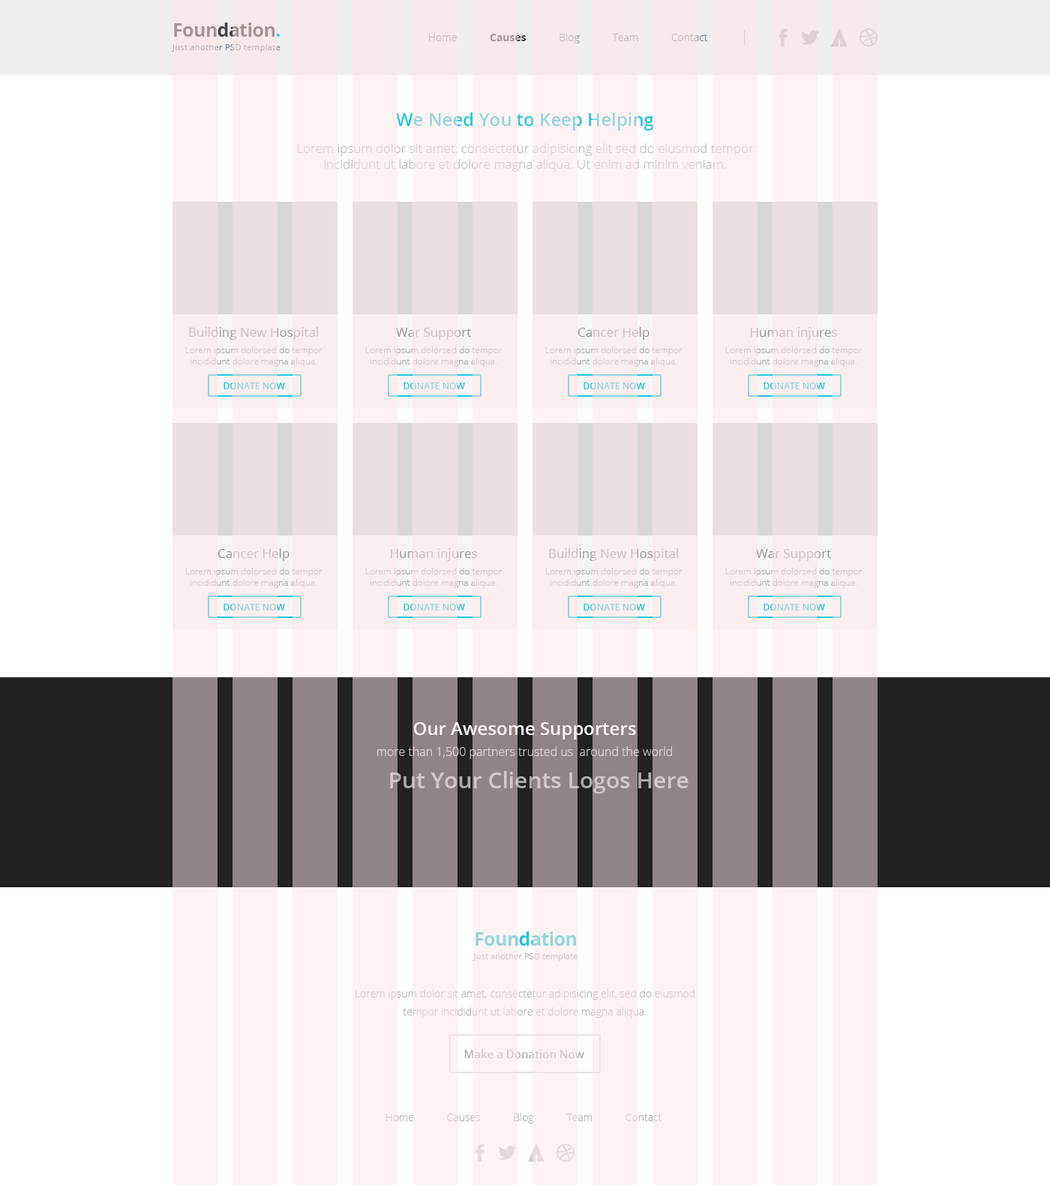
<style>
.page{position:relative;width:1050px;height:1185px;background:#ffffff}
.page>*{position:absolute;margin:0}
.t1{font:8.6px/13.5px "OpenSans";letter-spacing:0.015em;color:#a29595}
.t2{font:18.8px/22.5px "OpenSans-Bold";letter-spacing:-0.025em;color:#a29595}
.t3{font:10.5px "OpenSans-Light";color:#7e8a98}
.t4{font:10.5px "OpenSans-Bold";color:#444444}
.t5{font:15px "OpenSans-Light";color:#b0b0b0}
.t6{font:12.8px/27px "OpenSans-Light"}
.t7{font:18px "OpenSans-Semibold"}
.t8{font:12.8px/15.8px "OpenSans-Light"}
.t9{font:9px "OpenSans-Light";color:#ccbfbf}
.t10{font:12.8px/21.6px "OpenSans";color:#ccbfbf}
.t11{font:9px/16.5px "OpenSans-Light";color:#ccbfbf}
.t12{font:9px "OpenSans-Light";color:#d5c8c8}
.t13{font:12.8px/21.6px "OpenSans";color:#d5c8c8}
.t14{font:9px/16.5px "OpenSans-Light";color:#d5c8c8}
.t15{font:9px "OpenSans-Semibold";color:#90d6df;text-transform:uppercase}
.t16{font:12px/21.6px "OpenSans-Light";color:#bbbbbb}
.t17{font:18px/21.6px "OpenSans-Semibold";color:#ffffff}
.t18{font:22.5px "OpenSans-Semibold";color:#d4c7c7}
.t19{font:8.2px/13.5px "OpenSans";letter-spacing:0.015em;color:#90d6df}
.t20{font:18.8px/22.5px "OpenSans-Bold";letter-spacing:-0.025em;color:#90d6df}
.t21{font:10.5px/18px "OpenSans-Light";color:#d8cbcb}
.t22{font:11.3px "OpenSans-Semibold";color:#d8cbcb}
.t23{font:10.5px "OpenSans-Light"}
</style>
<div class="page">
<p class="t1" style="left:172px;top:22px;width:108px;height:30px"><span class="t2">Foundation</span><span class="t2">.<br></span>Just another PSD template</p>
<p class="t3" style="left:429px;top:30px;width:317px;height:15px">Home            <span class="t4">Causes            </span>Blog            Team            Contact            <span class="t5">|</span></p>
<p class="t6" style="left:298px;top:112px;width:456px;height:60px;text-align:center"><span class="t7">We Need You to Keep Helping<br></span>Lorem ipsum dolor sit amet, consectetur adipisicing elit sed do eiusmod tempor <span class="t8">incididunt ut labore et dolore magna aliqua. Ut enim ad minim veniam.</span></p>
<p class="t9" style="left:185px;top:327px;width:137px;height:40px;text-align:center"><span class="t10">Building New Hospital<br></span><span class="t11">Lorem ipsum dolorsed do tempor </span>incididunt dolore magna aliqua.</p>
<p class="t12" style="left:365px;top:328px;width:137px;height:39px;text-align:center"><span class="t13">War Support<br></span><span class="t14">Lorem ipsum dolorsed do tempor </span>incididunt dolore magna aliqua.</p>
<p class="t9" style="left:545px;top:327px;width:137px;height:40px;text-align:center"><span class="t10">Cancer Help<br></span><span class="t11">Lorem ipsum dolorsed do tempor </span>incididunt dolore magna aliqua.</p>
<p class="t9" style="left:725px;top:327px;width:137px;height:40px;text-align:center"><span class="t10">Human injures<br></span><span class="t11">Lorem ipsum dolorsed do tempor </span>incididunt dolore magna aliqua.</p>
<p class="t15" style="left:224px;top:382px;width:61px;height:7px">Donate Now</p>
<p class="t15" style="left:404px;top:382px;width:61px;height:7px">Donate Now</p>
<p class="t15" style="left:584px;top:382px;width:61px;height:7px">Donate Now</p>
<p class="t15" style="left:764px;top:382px;width:61px;height:7px">Donate Now</p>
<p class="t9" style="left:185px;top:548px;width:137px;height:40px;text-align:center"><span class="t10">Cancer Help<br></span><span class="t11">Lorem ipsum dolorsed do tempor </span>incididunt dolore magna aliqua.</p>
<p class="t9" style="left:365px;top:548px;width:137px;height:40px;text-align:center"><span class="t10">Human injures<br></span><span class="t11">Lorem ipsum dolorsed do tempor </span>incididunt dolore magna aliqua.</p>
<p class="t9" style="left:545px;top:548px;width:137px;height:40px;text-align:center"><span class="t10">Building New Hospital<br></span><span class="t11">Lorem ipsum dolorsed do tempor </span>incididunt dolore magna aliqua.</p>
<p class="t12" style="left:725px;top:549px;width:137px;height:39px;text-align:center"><span class="t13">War Support<br></span><span class="t14">Lorem ipsum dolorsed do tempor </span>incididunt dolore magna aliqua.</p>
<p class="t15" style="left:224px;top:604px;width:61px;height:6px">Donate Now</p>
<p class="t15" style="left:404px;top:604px;width:61px;height:6px">Donate Now</p>
<p class="t15" style="left:584px;top:604px;width:61px;height:6px">Donate Now</p>
<p class="t15" style="left:764px;top:604px;width:61px;height:6px">Donate Now</p>
<p class="t16" style="left:377px;top:722px;width:295px;height:37px;text-align:center"><span class="t17">Our Awesome Supporters<br></span>more than 1,500 partners trusted us  around the world</p>
<p class="t18" style="left:390px;top:771px;width:298px;height:23px">Put Your Clients Logos Here</p>
<p class="t19" style="left:472px;top:932px;width:106px;height:30px;text-align:center"><span class="t20">Foundation<br></span>Just another PSD template</p>
<p class="t21" style="left:356px;top:989px;width:338px;height:29px;text-align:center">Lorem ipsum dolor sit amet, consectetur adipisicing elit, sed do eiusmod tempor incididunt ut labore et dolore magna aliqua.</p>
<p class="t22" style="left:464px;top:1049px;width:120px;height:9px">Make a Donation Now</p>
<p class="t23" style="left:386px;top:1113px;width:276px;height:11px">Home            Causes            Blog            Team            Contact</p>
</div>
